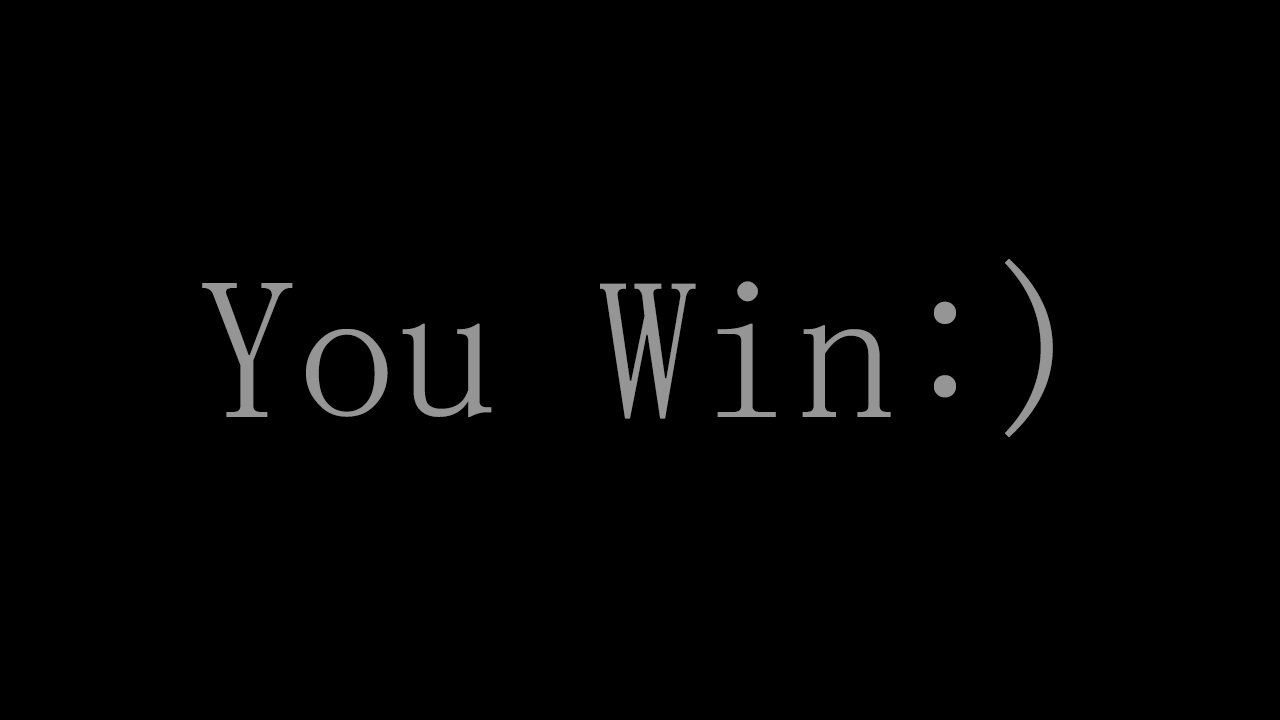
<style>
.page{position:relative;width:1280px;height:720px;background:#000000}
.page>*{position:absolute;margin:0}
.t1{font:200px "MS-Mincho";color:#959595}
</style>
<div class="page">
<p class="t1" style="left:202px;top:258px;width:851px;height:180px">You Win:)</p>
</div>
